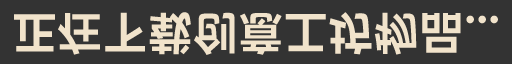
<style>
.page{position:relative;width:512px;height:64px;background:#333333}
.page>*{position:absolute;margin:0}
.t1{font:45px "HarmonyOS_Sans_SC_Bold";letter-spacing:0.005em;color:#f1e3cb}
</style>
<div class="page">
<p class="t1" style="left:14px;top:12px;width:484px;height:43px">正在下载创意工坊物品...</p>
</div>
